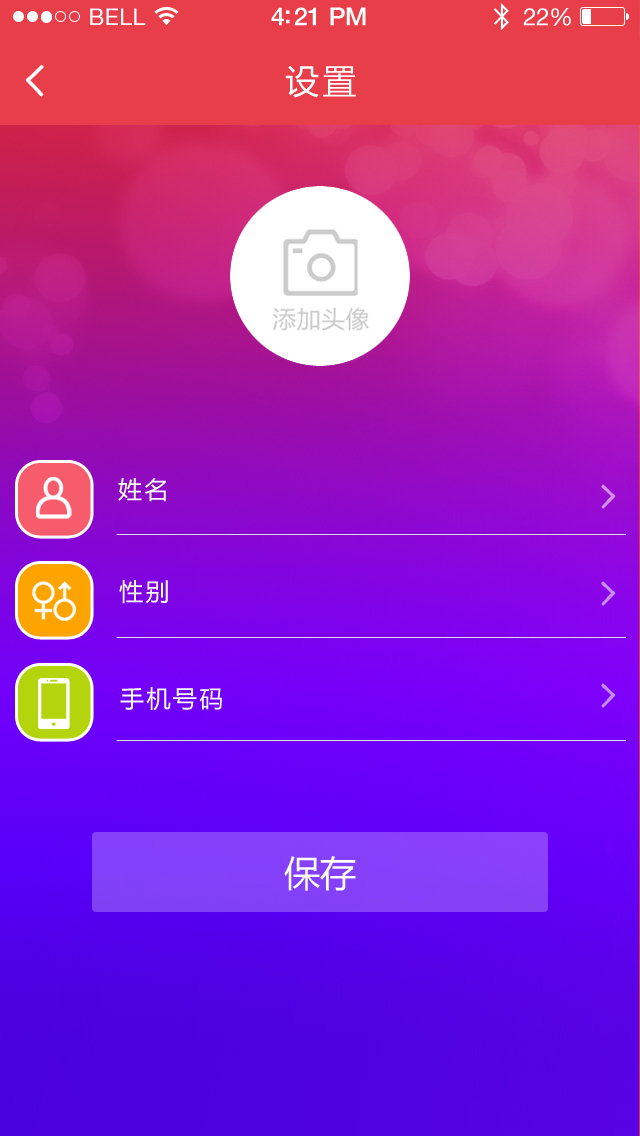
<style>
.page{position:relative;width:640px;height:1136px}
.page>*{position:absolute;margin:0}
.t1{font:23px "HelveticaNeue";letter-spacing:0.02em;color:#ffffff}
.t2{font:25px "HelveticaNeue-Medium";letter-spacing:-0.02em;color:#ffffff}
.t3{font:24px "HelveticaNeue";letter-spacing:-0.02em;color:#ffffff}
.t4{font:34px "MicrosoftYaHei";letter-spacing:0.1em;color:#ffffff}
.t5{font:24px "MicrosoftYaHei";letter-spacing:0.1em;color:#ffffff}
.t6{font:36px "MicrosoftYaHei";color:#ffffff}
</style>
<div class="page">
<p class="t1" style="left:90px;top:8px;width:56px;height:17px">BELL</p>
<p class="t2" style="left:271px;top:7px;width:95px;height:19px">4:21 PM</p>
<p class="t3" style="left:523px;top:8px;width:48px;height:18px">22%</p>
<p class="t4" style="left:285px;top:65px;width:71px;height:33px">设置</p>
<p class="t5" style="left:118px;top:478px;width:48px;height:24px">姓名</p>
<p class="t5" style="left:119px;top:580px;width:49px;height:24px">性别</p>
<p class="t5" style="left:120px;top:687px;width:102px;height:24px">手机号码</p>
<p class="t6" style="left:284px;top:856px;width:72px;height:35px">保存</p>
</div>
